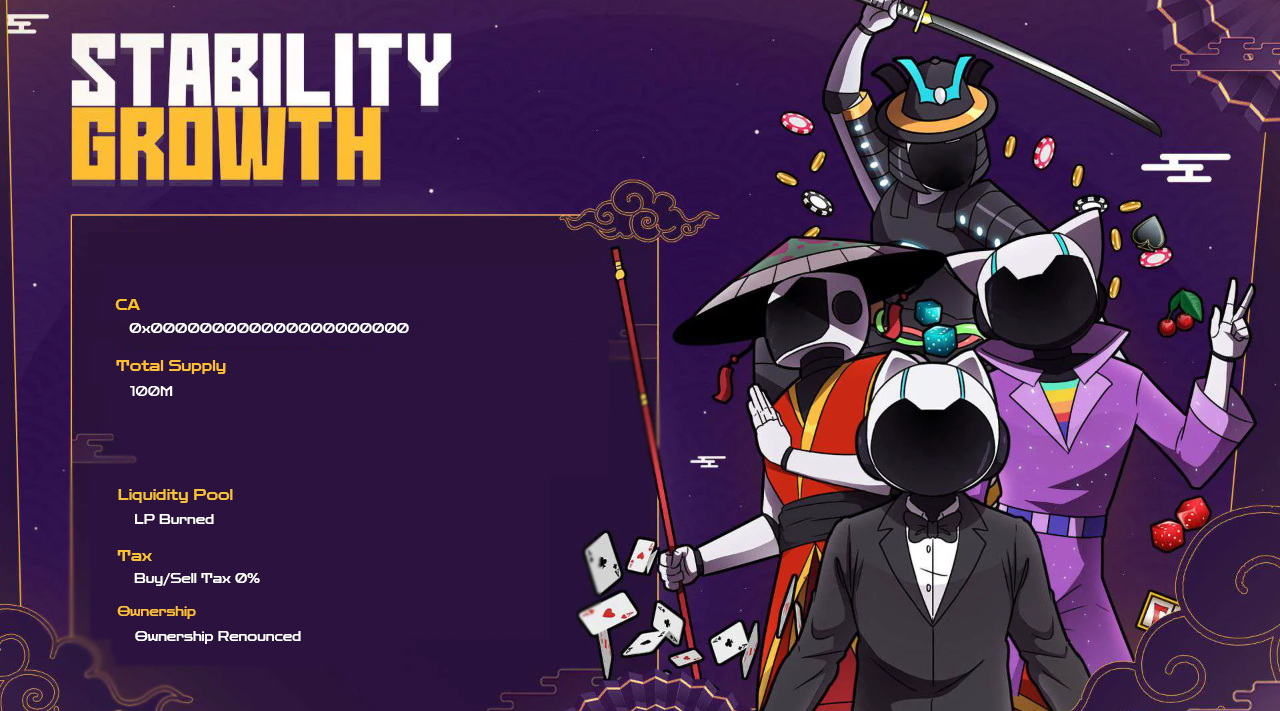
<style>
.page{position:relative;width:1280px;height:711px}
.page>*{position:absolute;margin:0}
.t1{font:14px "ZenDots-Regular";color:#fdc220}
.t2{font:12px "ZenDots-Regular";color:#ffffff}
.t3{font:14px "ZenDots-Regular";color:#ffbe30}
.t4{font:14px "ZenDots-Regular";color:#f6c033}
.t5{font:14px "ZenDots-Regular";color:#f8c132}
.t6{font:12px "ZenDots-Regular";color:#ffbf33}
</style>
<div class="page">
<p class="t1" style="left:115px;top:299px;width:25px;height:11px">CA</p>
<p class="t2" style="left:129px;top:323px;width:280px;height:10px">0x000000000000000000000</p>
<p class="t3" style="left:116px;top:360px;width:110px;height:14px">Total Supply</p>
<p class="t4" style="left:118px;top:489px;width:115px;height:14px">Liquidity Pool</p>
<p class="t2" style="left:135px;top:514px;width:79px;height:10px">LP Burned</p>
<p class="t5" style="left:117px;top:550px;width:35px;height:11px">Tax</p>
<p class="t2" style="left:134px;top:573px;width:126px;height:13px">0% Buy/Sell Tax</p>
<p class="t6" style="left:117px;top:606px;width:79px;height:13px">Ownership</p>
<p class="t2" style="left:135px;top:631px;width:166px;height:13px">Ownership Renounced</p>
</div>
